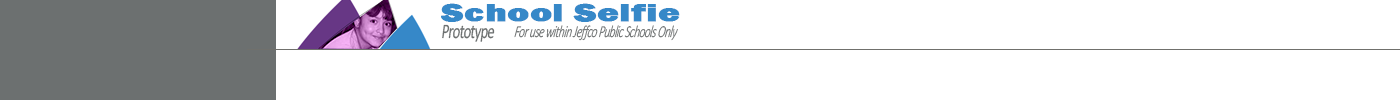
<style>
.page{position:relative;width:1400px;height:100px;background:#ffffff}
.page>*{position:absolute;margin:0}
.t1{font:25px "FranklinGothic-Heavy";color:#3688c8;font-weight:bold;scale:1.45 1}
.t2{font:20.8px "Calibri";letter-spacing:-0.05em;color:#6c7070;font-style:italic;scale:0.7 1}
.t3{font:16.7px "Calibri-LightItalic";letter-spacing:-0.05em;color:#6c7070;font-style:italic;scale:0.7 1}
</style>
<div class="page">
<p class="t1" style="left:440px;top:3px;width:240px;height:19px">School Selfie</p>
<p class="t2" style="left:442px;top:24px;width:53px;height:18px">Prototype</p>
<p class="t3" style="left:514px;top:25px;width:164px;height:16px">For use within Jeffco Public Schools Only</p>
</div>
